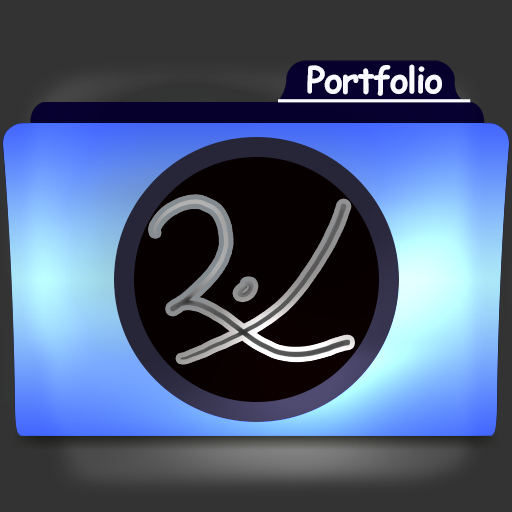
<style>
.page{position:relative;width:512px;height:512px;background:#333333}
.page>*{position:absolute;margin:0}
.t1{font:36px "ComicSansMS-Bold";letter-spacing:-0.04em;color:#f9faff;text-decoration:underline}
</style>
<div class="page">
<p class="t1" style="left:278px;top:64px;width:193px;height:39px">Portfolio</p>
</div>
